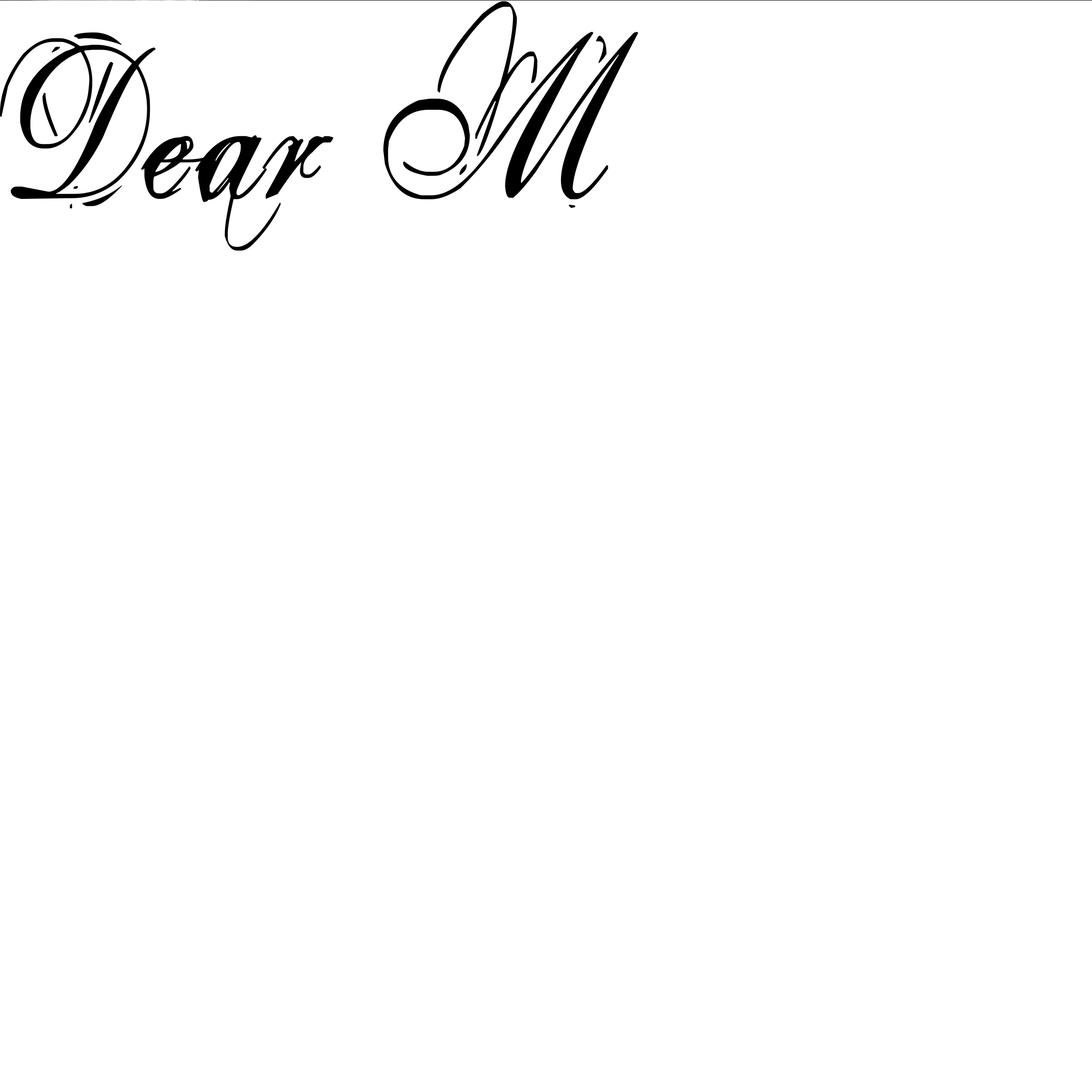
<style>
.page{position:relative;width:1092px;height:1092px;background:#ffffff}
.page>*{position:absolute;margin:0}
.t1{font:213.3px "EutemiaI-Italic";color:#000000}
</style>
<div class="page">
<p class="t1" style="left:0px;top:1px;width:638px;height:249px">Dear M</p>
</div>
